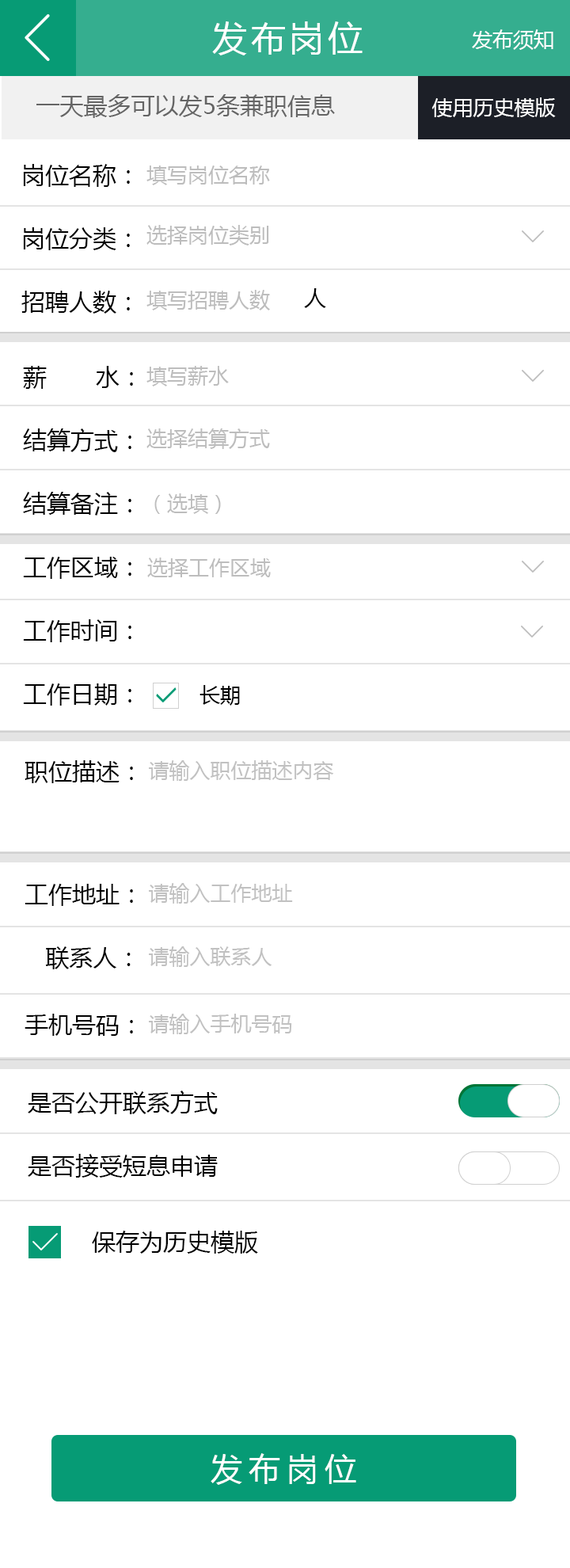
<style>
.page{position:relative;width:570px;height:1568px;background:#ffffff}
.page>*{position:absolute;margin:0}
.t1{font:34.8px "MicrosoftYaHei";letter-spacing:0.1em;color:#ffffff}
.t2{font:20.6px "MicrosoftYaHei";color:#ffffff}
.t3{font:23.8px "MicrosoftYaHei";color:#656565}
.t4{font:23.8px/63.4px "MicrosoftYaHei";color:#000000}
.t5{font:20.6px "MicrosoftYaHei";color:#bdbdbd}
.t6{font:22.2px "MicrosoftYaHei";color:#000000}
.t7{font:20.6px "MicrosoftYaHei";color:#000000}
.t8{font:23.8px "MicrosoftYaHei";color:#000000}
.t9{font:20.6px "MicrosoftYaHei";color:#c1c1c1}
.t10{font:31.7px "MicrosoftYaHei";letter-spacing:0.2em;color:#ffffff}
</style>
<div class="page">
<p class="t1" style="left:212px;top:21px;width:151px;height:34px">发布岗位</p>
<p class="t2" style="left:472px;top:29px;width:82px;height:21px">发布须知</p>
<p class="t3" style="left:36px;top:94px;width:299px;height:24px">一天最多可以发5条兼职信息</p>
<p class="t2" style="left:432px;top:97px;width:124px;height:20px">使用历史模版</p>
<p class="t4" style="left:21px;top:164px;width:109px;height:150px">岗位名称：<br>岗位分类：<br>招聘人数：</p>
<p class="t5" style="left:147px;top:166px;width:123px;height:19px">填写岗位名称</p>
<p class="t5" style="left:147px;top:225px;width:122px;height:20px">选择岗位类别</p>
<p class="t5" style="left:147px;top:290px;width:123px;height:20px">填写招聘人数</p>
<p class="t6" style="left:304px;top:288px;width:22px;height:20px">人</p>
<p class="t4" style="left:23px;top:366px;width:110px;height:340px">薪       水：<br>结算方式：<br>结算备注：<br>工作区域：<br>工作时间：<br>工作日期：</p>
<p class="t5" style="left:147px;top:366px;width:82px;height:20px">填写薪水</p>
<p class="t5" style="left:147px;top:428px;width:123px;height:21px">选择结算方式</p>
<p class="t5" style="left:154px;top:493px;width:67px;height:21px">（选填）</p>
<p class="t5" style="left:147px;top:558px;width:124px;height:19px">选择工作区域</p>
<p class="t7" style="left:200px;top:685px;width:40px;height:21px">长期</p>
<p class="t8" style="left:25px;top:760px;width:108px;height:23px">职位描述：</p>
<p class="t9" style="left:149px;top:760px;width:185px;height:21px">请输入职位描述内容</p>
<p class="t8" style="left:25px;top:884px;width:108px;height:22px">工作地址：</p>
<p class="t9" style="left:149px;top:883px;width:144px;height:21px">请输入工作地址</p>
<p class="t8" style="left:45px;top:946px;width:86px;height:23px">联系人：</p>
<p class="t9" style="left:149px;top:946px;width:123px;height:21px">请输入联系人</p>
<p class="t8" style="left:25px;top:1014px;width:108px;height:22px">手机号码：</p>
<p class="t9" style="left:149px;top:1014px;width:143px;height:20px">请输入手机号码</p>
<p class="t4" style="left:28px;top:1090px;width:190px;height:88px">是否公开联系方式<br>是否接受短息申请</p>
<p class="t8" style="left:92px;top:1231px;width:166px;height:23px">保存为历史模版</p>
<p class="t10" style="left:211px;top:1453px;width:145px;height:32px">发布岗位</p>
</div>
